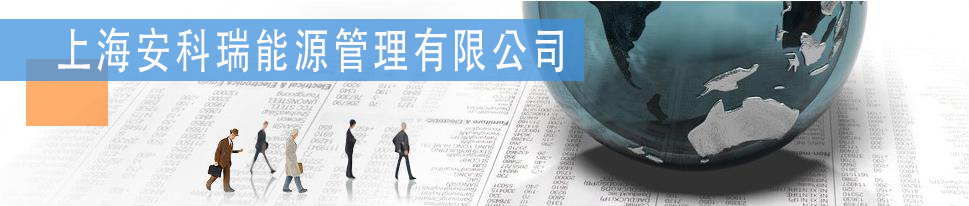
<style>
.page{position:relative;width:969px;height:206px}
.page>*{position:absolute;margin:0}
.t1{font:48.6px "STHeitiTC-Medium";letter-spacing:0.1em;color:#fcfafa;scale:0.74 1}
</style>
<div class="page">
<p class="t1" style="left:58px;top:27px;width:505px;height:46px">上海安科瑞能源管理有限公司</p>
</div>
